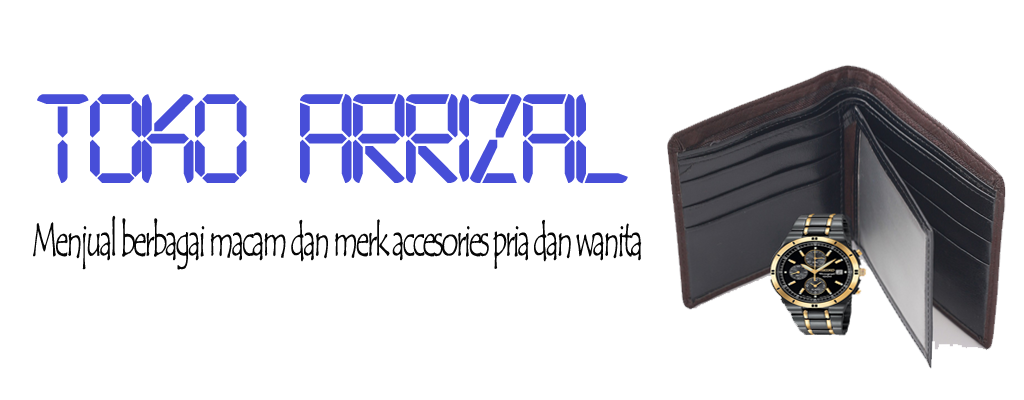
<style>
.page{position:relative;width:1024px;height:400px;background:#ffffff}
.page>*{position:absolute;margin:0}
.t1{font:135.5px "Digital-7";letter-spacing:-0.08em;color:#474ed8}
.t2{font:46.9px "TempusSansITC";letter-spacing:-0.08em;color:#060606;scale:0.62 1}
</style>
<div class="page">
<p class="t1" style="left:37px;top:94px;width:591px;height:90px">TOKO  ARRIZAL</p>
<p class="t2" style="left:33px;top:215px;width:609px;height:55px">Menjual berbagai macam dan merk accesories pria dan wanita</p>
</div>
